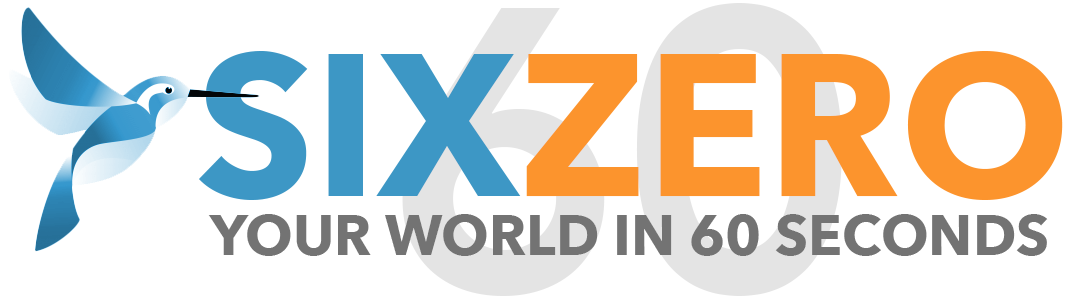
<style>
.page{position:relative;width:1070px;height:300px;background:#ffffff}
.page>*{position:absolute;margin:0}
.t1{font:200px "AvenirNext-Bold";color:#fc942d}
.t2{font:200px "AvenirNext-Bold";color:#3d97c5}
.t3{font:56px "AvenirNext-Bold";color:#737373}
</style>
<div class="page">
<p class="t1" style="left:199px;top:51px;width:864px;height:149px"><span class="t2">SIX</span>ZERO</p>
<p class="t3" style="left:208px;top:214px;width:840px;height:42px">YOUR WORLD IN 60 SECONDS</p>
</div>
